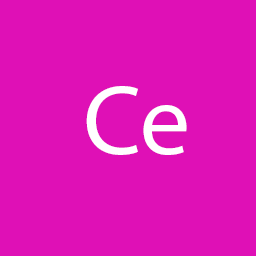
<style>
.page{position:relative;width:256px;height:256px;background:#df10b6}
.page>*{position:absolute;margin:0}
.t1{font:100px "MyriadPro-Regular";color:#ffffff}
</style>
<div class="page">
<p class="t1" style="left:86px;top:86px;width:101px;height:69px">Ce</p>
</div>
